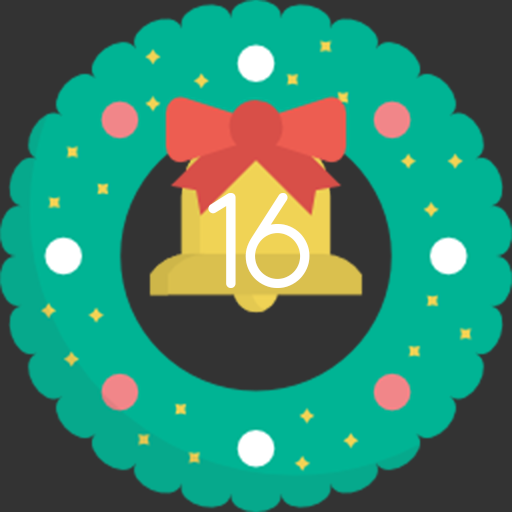
<style>
.page{position:relative;width:512px;height:512px;background:#00b494}
.page>*{position:absolute;margin:0}
.t1{font:149.3px "Antipasto";color:#ffffff}
</style>
<div class="page">
<p class="t1" style="left:208px;top:193px;width:102px;height:95px">16</p>
</div>
